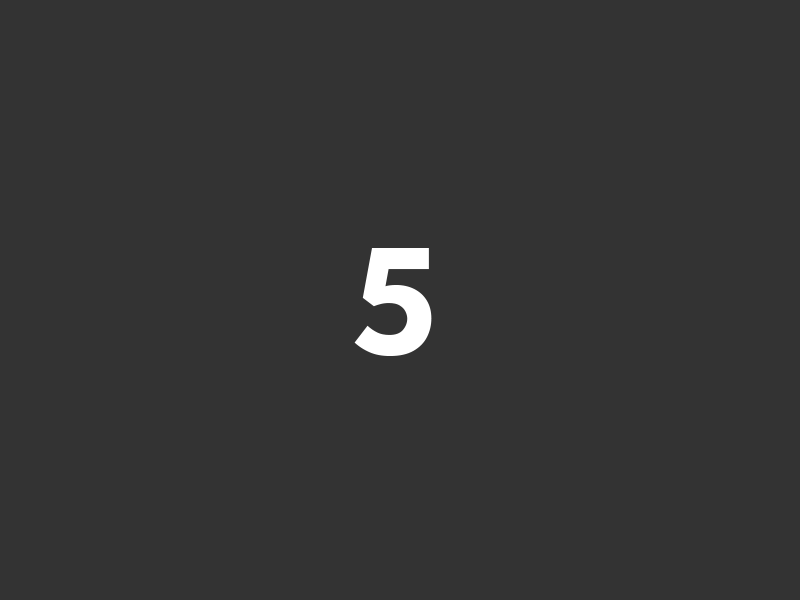
<style>
.page{position:relative;width:800px;height:600px;background:#333333}
.page>*{position:absolute;margin:0}
.t1{font:166.7px "Effra-Bold";color:#ffffff}
</style>
<div class="page">
<p class="t1" style="left:354px;top:248px;width:78px;height:108px">5</p>
</div>
